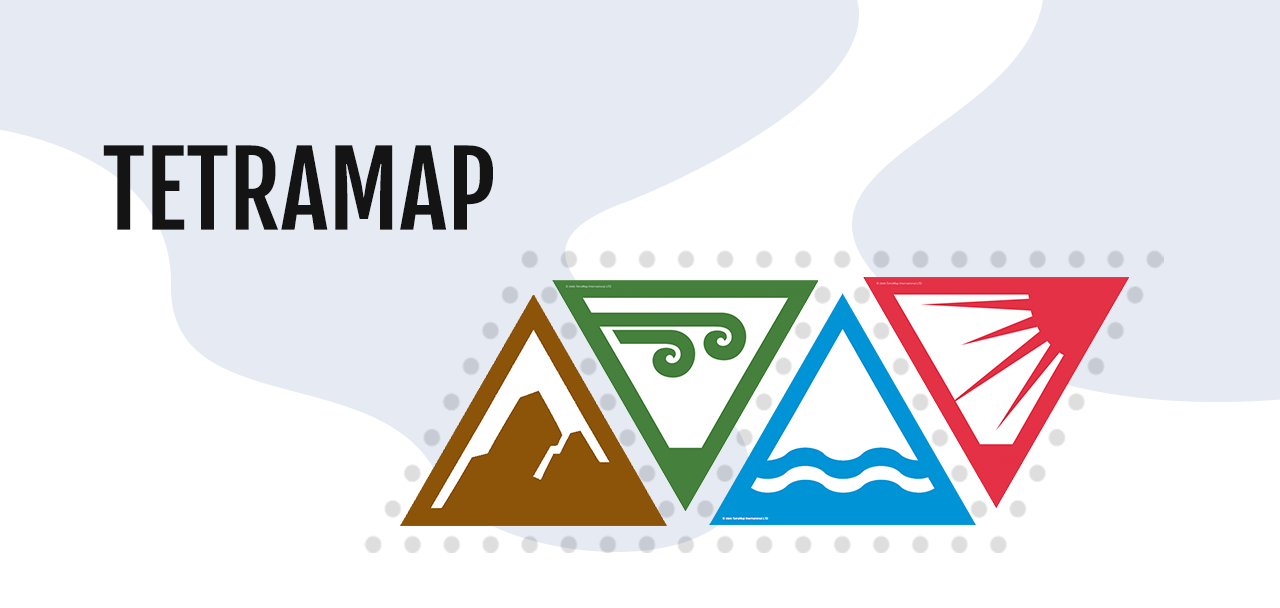
<style>
.page{position:relative;width:1280px;height:608px;background:#ffffff}
.page>*{position:absolute;margin:0}
.t1{font:101px "FjallaOne-Regular";color:#141415}
</style>
<div class="page">
<p class="t1" style="left:103px;top:145px;width:390px;height:85px">TETRAMAP</p>
</div>
